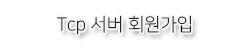
<style>
.page{position:relative;width:250px;height:50px;background:#ffffff}
.page>*{position:absolute;margin:0}
.t1{font:18px "NanumSquareL";color:#000000}
</style>
<div class="page">
<p class="t1" style="left:57px;top:15px;width:134px;height:20px">Tcp 서버 회원가입</p>
</div>
